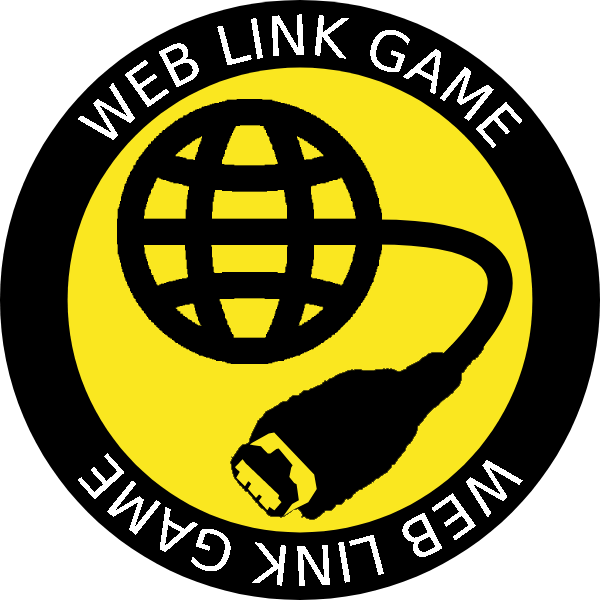
<style>
.page{position:relative;width:600px;height:600px;background:#000000}
.page>*{position:absolute;margin:0}
.t1{font:55px "DejaVuSans";color:#ffffff}
</style>
<div class="page">
<p class="t1" style="left:77px;top:14px;width:446px;height:135px;text-align:center">WEB LINK GAME</p>
<p class="t1" style="left:77px;top:453px;width:446px;height:134px;text-align:center">WEB LINK GAME</p>
</div>
